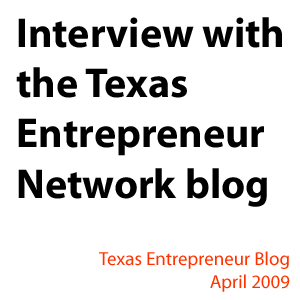
<style>
.page{position:relative;width:300px;height:300px;background:#ffffff}
.page>*{position:absolute;margin:0}
.t1{font:41.8px "MyriadPro-Bold";color:#000000}
.t2{font:18.9px "MyriadPro-Regular";color:#ff3300}
</style>
<div class="page">
<p class="t1" style="left:16px;top:17px;width:266px;height:190px">Interview with<br>the Texas<br>Entrepreneur<br>Network blog</p>
<p class="t2" style="left:99px;top:251px;width:191px;height:41px;text-align:right">Texas Entrepreneur Blog<br>April 2009</p>
</div>
